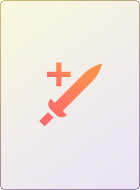
<style>
.page{position:relative;width:140px;height:190px}
.page>*{position:absolute;margin:0}
.t1{font:48px "Inter-SemiBold";color:#fd7c5f}
</style>
<div class="page">
<p class="t1" style="left:47px;top:62px;width:24px;height:25px">+</p>
</div>
